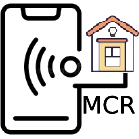
<style>
.page{position:relative;width:139px;height:139px;background:#ffffff}
.page>*{position:absolute;margin:0}
.t1{font:24px "DejaVuSans";color:#000000}
</style>
<div class="page">
<p class="t1" style="left:83px;top:95px;width:52px;height:19px">MCR</p>
</div>
